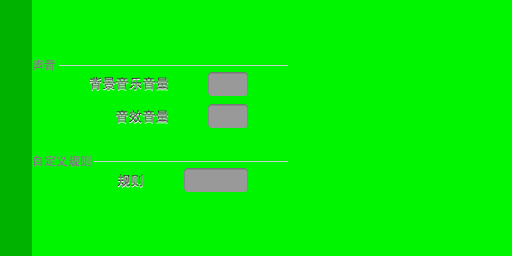
<style>
.page{position:relative;width:512px;height:256px;background:#00f500}
.page>*{position:absolute;margin:0}
.t1{font:12px "DFPHeiW5-GB";color:#797979}
.t2{font:13.3px "DFPHeiW5-GB";color:#797979}
.t3{font:13.3px "DFPHeiW5-GB"}
</style>
<div class="page">
<p class="t1" style="left:32px;top:59px;width:24px;height:12px">声音</p>
<p class="t2" style="left:89px;top:77px;width:80px;height:13px">背景音乐音量</p>
<p class="t3" style="left:116px;top:110px;width:53px;height:13px">音效音量</p>
<p class="t1" style="left:33px;top:155px;width:58px;height:12px">自定义规则</p>
<p class="t3" style="left:117px;top:174px;width:26px;height:13px">规则</p>
</div>
